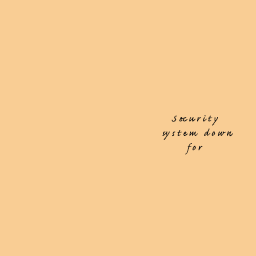
<style>
.page{position:relative;width:256px;height:256px;background:#f9cd94}
.page>*{position:absolute;margin:0}
.t1{font:12px "CaflischScriptPro-Regular";letter-spacing:0.205em;color:#181716}
</style>
<div class="page">
<p class="t1" style="left:162px;top:115px;width:71px;height:40px;text-align:center">Security <br>system down<br>for</p>
</div>
